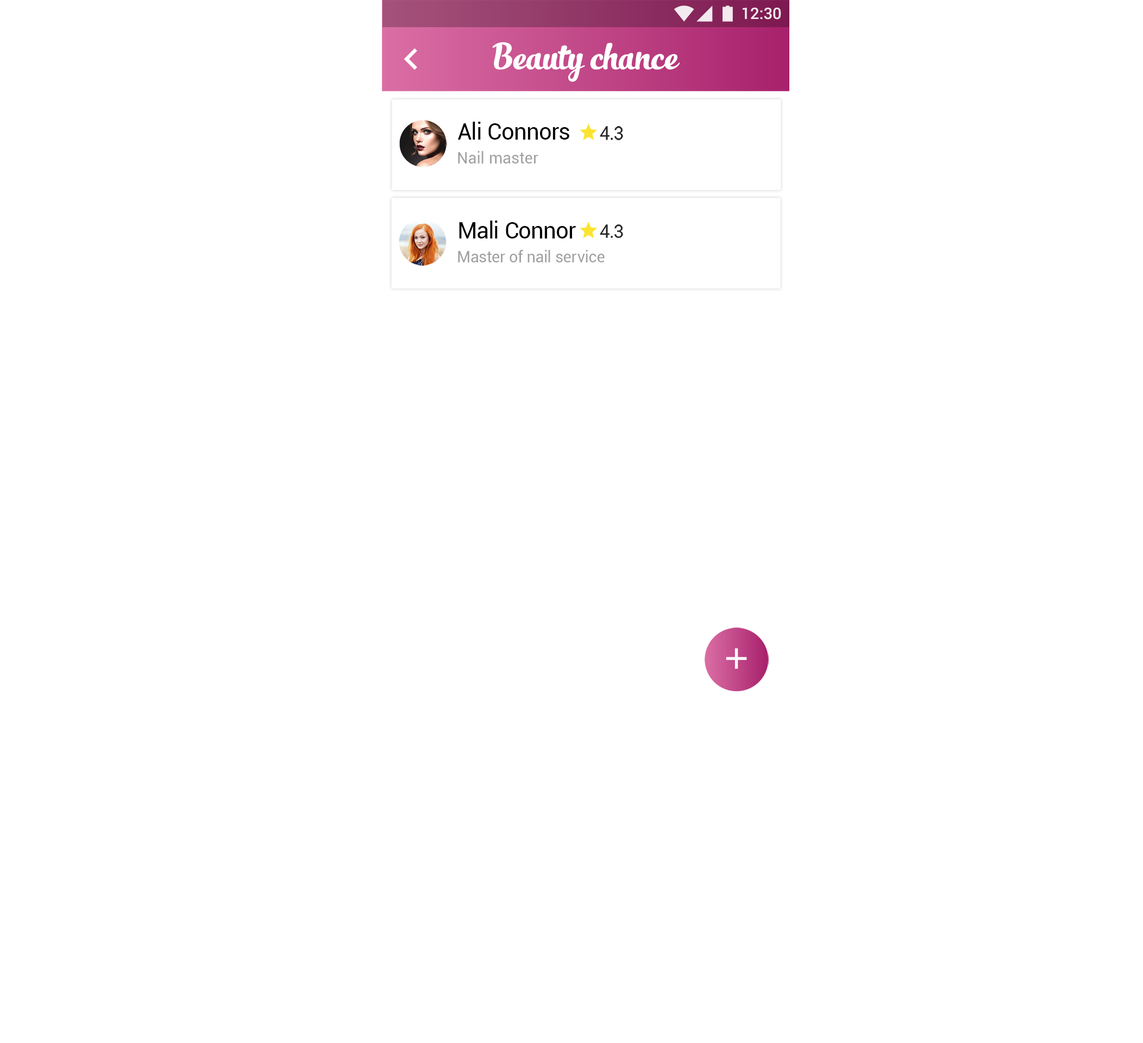
<style>
.page{position:relative;width:1143px;height:1043px;background:#ffffff}
.page>*{position:absolute;margin:0}
.t1{font:15.9px "Roboto-Medium";color:#ffffff}
.t2{font:27.2px "SlimTony-Italic";color:#ffffff}
.t3{font:22.7px "Roboto-Regular";letter-spacing:-0.005em;color:#000000}
.t4{font:15.9px "Roboto-Regular";letter-spacing:0.01em;color:#a1a1a1}
.t5{font:15.9px "Roboto-Regular";letter-spacing:-0.005em;color:#a1a1a1}
</style>
<div class="page">
<p class="t1" style="left:743px;top:8px;width:38px;height:12px">12:30</p>
<p class="t2" style="left:492px;top:42px;width:188px;height:40px">Beauty chance</p>
<p class="t3" style="left:458px;top:122px;width:111px;height:18px">Ali Connors</p>
<p class="t4" style="left:458px;top:151px;width:80px;height:13px">Nail master</p>
<p class="t3" style="left:459px;top:221px;width:117px;height:18px">Mali Connor</p>
<p class="t5" style="left:458px;top:250px;width:147px;height:12px">Master of nail service</p>
</div>
